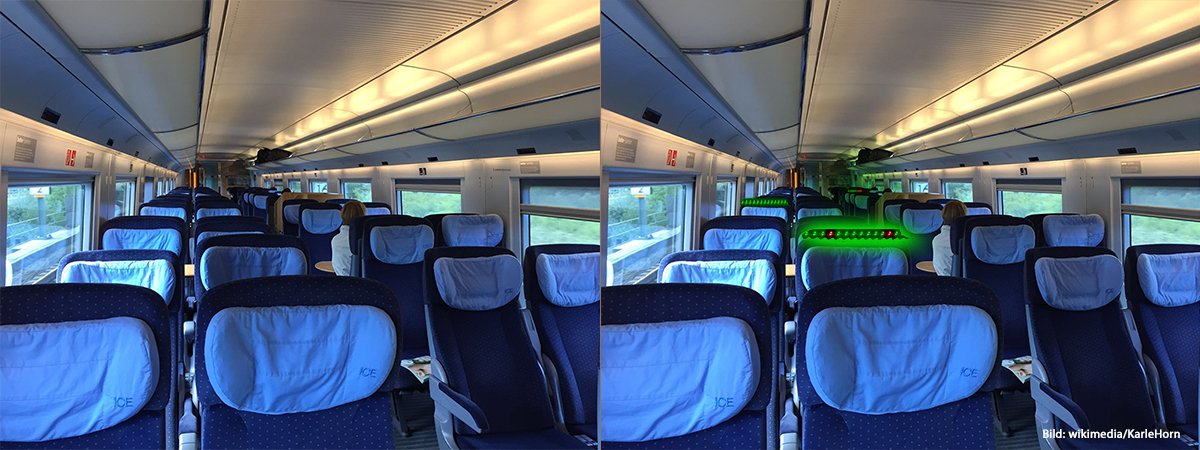
<style>
.page{position:relative;width:1200px;height:450px}
.page>*{position:absolute;margin:0}
.t1{font:3px "MyriadPro-Regular";font-weight:bold}
.t2{font:12px "MyriadPro-Regular";color:#ffffff;font-weight:bold}
</style>
<div class="page">
<p class="t1" style="left:493px;top:168px;width:18px;height:4px">Lorem Ipsum</p>
<p class="t2" style="left:1043px;top:429px;width:137px;height:10px">Bild: wikimedia/KarleHorn</p>
</div>
